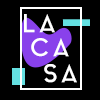
<style>
.page{position:relative;width:100px;height:100px;background:#000000}
.page>*{position:absolute;margin:0}
.t1{font:25px "AquaGrotesque";letter-spacing:0.04em;color:#ffffff;scale:1.03 1}
</style>
<div class="page">
<p class="t1" style="left:24px;top:14px;width:31px;height:19px">LA</p>
<p class="t1" style="left:31px;top:38px;width:38px;height:19px">CA</p>
<p class="t1" style="left:44px;top:64px;width:33px;height:19px">SA</p>
</div>
